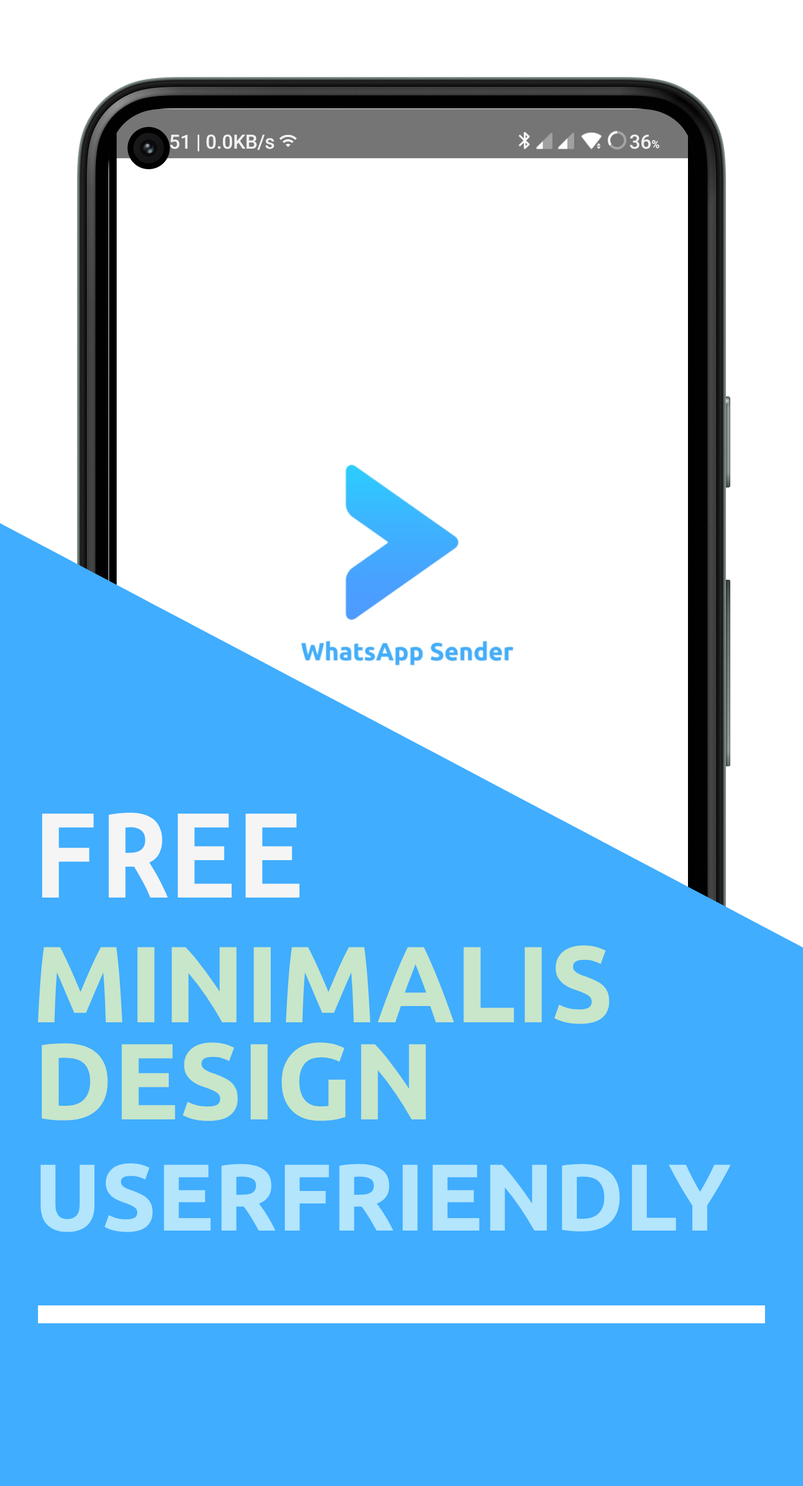
<style>
.page{position:relative;width:803px;height:1486px;background:#ffffff}
.page>*{position:absolute;margin:0}
.t1{font:135.6px "UbuntuMono-Bold";color:#f5f5f5}
.t2{font:108.5px "Ubuntu-Bold";color:#c8e6c9}
.t3{font:94.9px "Ubuntu-Bold";color:#b3e5fc}
</style>
<div class="page">
<p class="t1" style="left:42px;top:812px;width:257px;height:85px">FREE</p>
<p class="t2" style="left:37px;top:945px;width:572px;height:79px">MINIMALIS</p>
<p class="t2" style="left:42px;top:1042px;width:384px;height:79px">DESIGN</p>
<p class="t3" style="left:40px;top:1163px;width:690px;height:69px">USERFRIENDLY</p>
</div>
